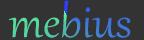
<style>
.page{position:relative;width:144px;height:40px;background:#333333}
.page>*{position:absolute;margin:0}
.t1{font:55px "Gabriola"}
</style>
<div class="page">
<p class="t1" style="left:9px;top:0px;width:122px;height:38px">mebius</p>
</div>
